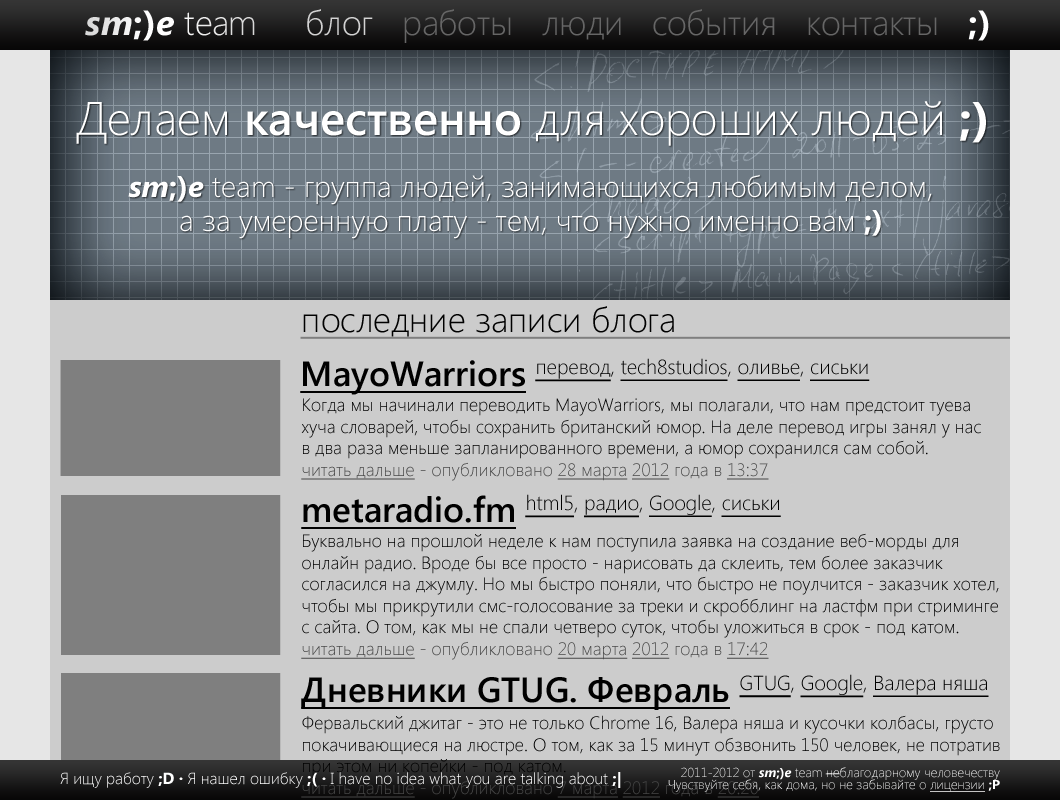
<style>
.page{position:relative;width:1060px;height:800px;background:#cccccc}
.page>*{position:absolute;margin:0}
.t1{font:35px "SegoeUI-Light";letter-spacing:-0.02em;color:#ffffff}
.t2{font:35px "SegoeUI-BoldItalic";color:#ffffff}
.t3{font:35px "SegoeUI-BoldItalic";letter-spacing:0.02em;color:#ffffff}
.t4{font:35px "SegoeUI-Bold";letter-spacing:0.02em;color:#ffffff}
.t5{font:35px "SegoeUI-Bold";color:#ffffff}
.t6{font:35px "SegoeUI-Light";letter-spacing:0.01em;color:#ffffff}
.t7{font:35px "SegoeUI-Light";letter-spacing:-0.05em;color:#ffffff}
.t8{font:35px "SegoeUI-Light";color:#666666}
.t9{font:35px "SegoeUI-Light";color:#d3d3d3}
.t10{font:35px "SegoeUI-Light";letter-spacing:-0.035em;color:#666666}
.t11{font:35px "SegoeUI-Light";letter-spacing:0.01em;color:#666666}
.t12{font:35px "SegoeUI-Light";letter-spacing:-0.02em;color:#666666}
.t13{font:47px "SegoeUI-Light";color:#ffffff}
.t14{font:47px "SegoeUI-SemiBold";color:#ffffff}
.t15{font:47px "SegoeUI-Bold";color:#ffffff}
.t16{font:30px/34px "SegoeUI-Light";color:#ffffff}
.t17{font:30px/34px "SegoeUI-BoldItalic";color:#ffffff}
.t18{font:30px/34px "SegoeUI-Bold";color:#ffffff}
.t19{font:35px "SegoeUI-Light";color:#000000}
.t20{font:35px "SegoeUI-SemiBold";color:#000000;text-decoration:underline}
.t21{font:35px "SegoeUI-Light";color:#000000;text-decoration:underline}
.t22{font:18px "SegoeUI-Light";color:#000000}
.t23{font:18px "SegoeUI-Light";color:#474747;text-decoration:underline}
.t24{font:18px "SegoeUI-Light";color:#474747}
.t25{font:16px "SegoeUI-Light";color:#ffffff}
.t26{font:16px "SegoeUI-Bold";color:#ffffff}
.t27{font:13px/12px "SegoeUI-Light";color:#ffffff}
.t28{font:13px/12px "SegoeUI-BoldItalic";color:#ffffff}
.t29{font:13px/12px "SegoeUI-Bold";color:#ffffff}
.t30{font:13px/12px "SegoeUI-Light";color:#ffffff;text-decoration:underline}
</style>
<div class="page">
<p class="t1" style="left:85px;top:10px;width:170px;height:31px"><span class="t2">s</span><span class="t3">m</span><span class="t4">;</span><span class="t5">)</span><span class="t2">e </span><span class="t6">t</span>ea<span class="t7">m</span></p>
<p class="t8" style="left:307px;top:9px;width:682px;height:34px"><span class="t9">блог</span>   р<span class="t10">а</span><span class="t11">бо</span>ты   л<span class="t12">юд</span>и   с<span class="t12">об</span>ытия   конт<span class="t12">ак</span>ты   <span class="t5">;)</span></p>
<p class="t13" style="left:76px;top:101px;width:910px;height:45px">Делаем <span class="t14">качественно</span> для хороших людей <span class="t15">;)</span></p>
<p class="t16" style="left:128px;top:174px;width:804px;height:65px;text-align:center"><span class="t17">sm</span><span class="t18">;)</span><span class="t17">e</span> team - группа людей, занимающихся любимым делом,<br>а за умеренную плату - тем, что нужно именно вам <span class="t18">;)</span></p>
<p class="t19" style="left:303px;top:306px;width:371px;height:31px">последние записи блога</p>
<p class="t20" style="left:300px;top:358px;width:570px;height:37px">MayoWarriors <span class="t21">перевод</span><span class="t19">, </span><span class="t21">tech8studios</span><span class="t19">, </span><span class="t21">оливье</span><span class="t19">, </span><span class="t21">сиськи</span></p>
<p class="t22" style="left:301px;top:398px;width:680px;height:83px">Когда мы начинали переводить MayoWarriors, мы полагали, что нам предстоит туева<br>хуча словарей, чтобы сохранить британский юмор. На деле перевод игры занял у нас<br>в два раза меньше запланированного времени, а юмор сохранился сам собой.<br><span class="t23">читать дальше</span><span class="t24"> - опубликловано </span><span class="t23">28 марта 2012</span><span class="t24"> года в </span><span class="t23">13:37</span></p>
<p class="t20" style="left:301px;top:494px;width:480px;height:35px">metaradio.fm <span class="t21">html5</span><span class="t19">, </span><span class="t21">радио</span><span class="t19">, </span><span class="t21">Google</span><span class="t19">, </span><span class="t21">сиськи</span></p>
<p class="t22" style="left:301px;top:533px;width:698px;height:127px">Буквально на прошлой неделе к нам поступила заявка на создание веб-морды для<br>онлайн радио. Вроде бы все просто - нарисовать да склеить, тем более заказчик<br>согласился на джумлу. Но мы быстро поняли, что быстро не поулчится - заказчик хотел,<br>чтобы мы прикрутили смс-голосование за треки и скробблинг на ластфм при стриминге<br>с сайта. О том, как мы не спали четверо суток, чтобы уложиться в срок - под катом.<br><span class="t23">читать дальше</span><span class="t24"> - опубликловано </span><span class="t23">20 марта 2012</span><span class="t24"> года в </span><span class="t23">17:42</span></p>
<p class="t20" style="left:301px;top:674px;width:688px;height:36px">Дневники GTUG. Февраль <span class="t21">GTUG</span><span class="t19">, </span><span class="t21">Google</span><span class="t19">, </span><span class="t21">Валера няша</span></p>
<p class="t25" style="left:60px;top:772px;width:561px;height:16px">Я ищу работу <span class="t26">;D · </span>Я нашел ошибку <span class="t26">;( · </span>I have no idea what you are talking about <span class="t26">;|</span></p>
<p class="t27" style="left:668px;top:767px;width:332px;height:25px;text-align:right">2011-2012 от <span class="t28">sm</span><span class="t29">;)</span><span class="t28">e</span> team неблагодарному человечеству<br>Чувствуйте себя, как дома, но не забывайте о <span class="t30">лицензии </span><span class="t29">;P</span></p>
</div>
